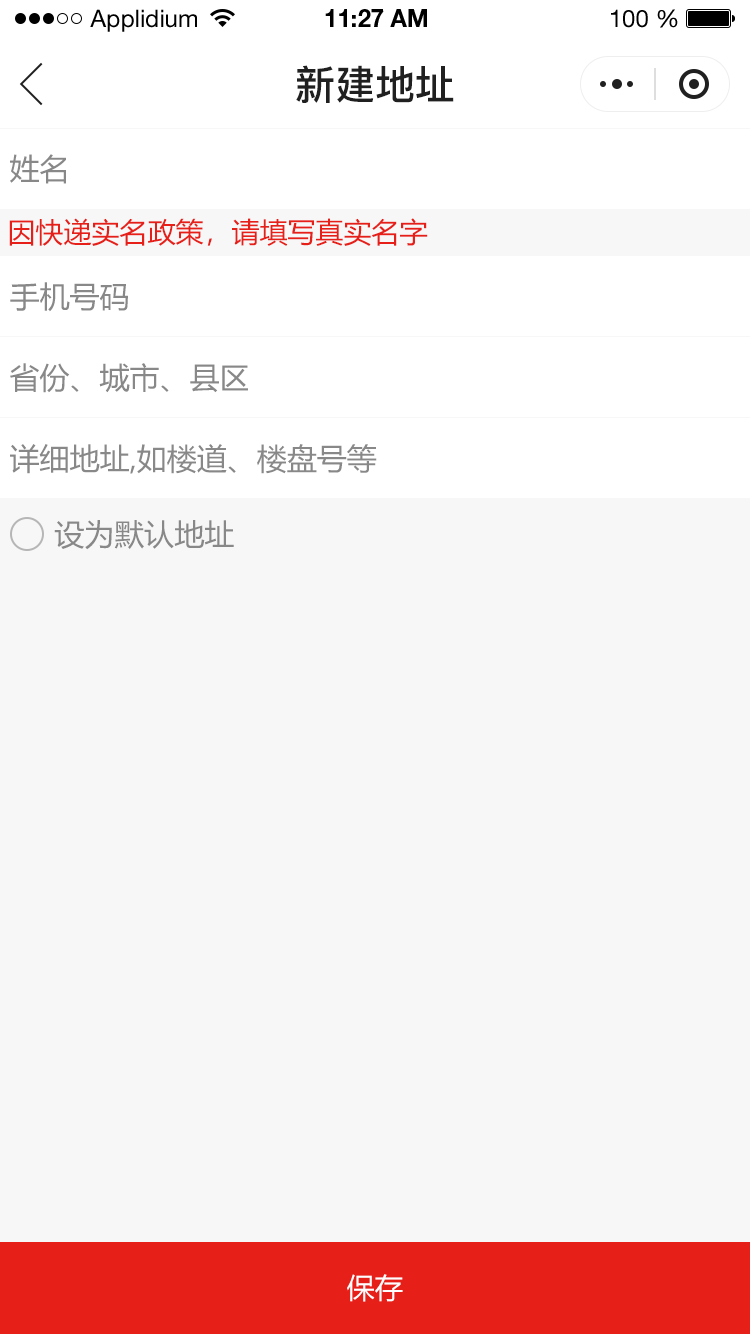
<style>
.page{position:relative;width:750px;height:1334px;background:#f7f7f7}
.page>*{position:absolute;margin:0}
.t1{font:24px "HelveticaNeueLTStd-Roman";color:#000000}
.t2{font:24px "HelveticaNeueLTStd-Bd";color:#000000}
.t3{font:40px "PingFang-SC-Bold";color:#202020;text-transform:uppercase}
.t4{font:30px "MicrosoftYaHei";color:#888888;text-transform:uppercase}
.t5{font:28px "MicrosoftYaHei";color:#e61f18;text-transform:uppercase}
.t6{font:28px "MicrosoftYaHei";color:#fffefe;text-transform:uppercase}
</style>
<div class="page">
<p class="t1" style="left:90px;top:9px;width:107px;height:23px">Applidium</p>
<p class="t2" style="left:325px;top:9px;width:102px;height:18px">11:27 AM</p>
<p class="t1" style="left:611px;top:9px;width:67px;height:19px">100 %</p>
<p class="t3" style="left:296px;top:65px;width:158px;height:38px">新建地址</p>
<p class="t4" style="left:10px;top:154px;width:56px;height:30px">姓名</p>
<p class="t5" style="left:9px;top:218px;width:419px;height:28px">因快递实名政策，请填写真实名字</p>
<p class="t4" style="left:10px;top:282px;width:118px;height:30px">手机号码</p>
<p class="t4" style="left:10px;top:363px;width:238px;height:30px">省份、城市、县区</p>
<p class="t4" style="left:10px;top:444px;width:367px;height:30px">详细地址,如楼道、楼盘号等</p>
<p class="t4" style="left:54px;top:520px;width:180px;height:30px">设为默认地址</p>
<p class="t6" style="left:347px;top:1274px;width:56px;height:28px">保存</p>
</div>
